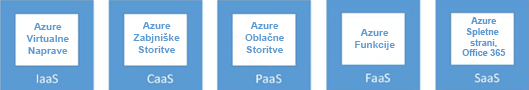
<style>
.page{position:relative;width:529px;height:90px;background:#ffffff}
.page>*{position:absolute;margin:0}
.t1{font:9px "Arial-BoldMT";color:#5a9bd3}
.t2{font:10px "Arial-BoldMT";color:#5a9bd3}
</style>
<div class="page">
<p class="t1" style="left:462px;top:17px;width:44px;height:39px;text-align:center">Azure<br>Spletne <br>strani,<br>Office 365</p>
<p class="t2" style="left:26px;top:23px;width:43px;height:33px;text-align:center">Azure<br>Virtualne<br>Naprave</p>
<p class="t2" style="left:133px;top:22px;width:47px;height:31px;text-align:center">Azure<br>Zabjniške<br>Storitve</p>
<p class="t2" style="left:245px;top:22px;width:39px;height:31px;text-align:center">Azure<br>Oblačne<br>Storitve</p>
<p class="t2" style="left:355px;top:29px;width:40px;height:21px;text-align:center">Azure<br>Funkcije</p>
</div>
